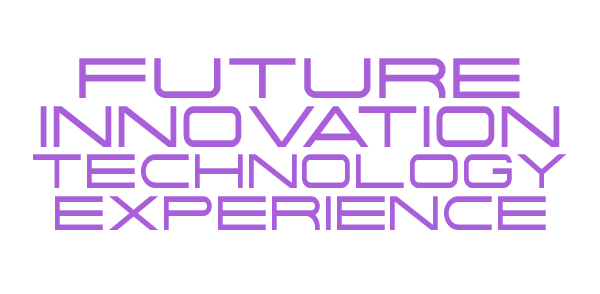
<style>
.page{position:relative;width:600px;height:294px;background:#ffffff}
.page>*{position:absolute;margin:0}
.t1{font:57.1px "Centauri";color:#a85fd9}
.t2{font:58.4px "Centauri";color:#a85fd9;scale:0.85 1}
.t3{font:48.4px "Centauri";color:#a85fd9;scale:0.85 1}
</style>
<div class="page">
<p class="t1" style="left:79px;top:58px;width:441px;height:40px">FUTURE</p>
<p class="t2" style="left:40px;top:106px;width:520px;height:41px">INNOVATION</p>
<p class="t3" style="left:33px;top:154px;width:534px;height:34px">TECHNOLOGY</p>
<p class="t3" style="left:55px;top:196px;width:491px;height:34px">EXPERIENCE</p>
</div>
